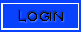
<style>
.page{position:relative;width:81px;height:32px;background:#0842fd}
.page>*{position:absolute;margin:0}
.t1{font:16.8px "CopperplateGothic-Light";color:#030303;scale:0.88 1}
</style>
<div class="page">
<p class="t1" style="left:19px;top:10px;width:44px;height:12px">Login</p>
</div>
